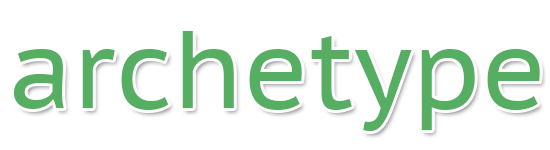
<style>
.page{position:relative;width:550px;height:150px;background:#ffffff}
.page>*{position:absolute;margin:0}
.t1{font:110px "PTSans-Caption";color:#55ae61}
</style>
<div class="page">
<p class="t1" style="left:13px;top:31px;width:527px;height:100px">archetype</p>
</div>
